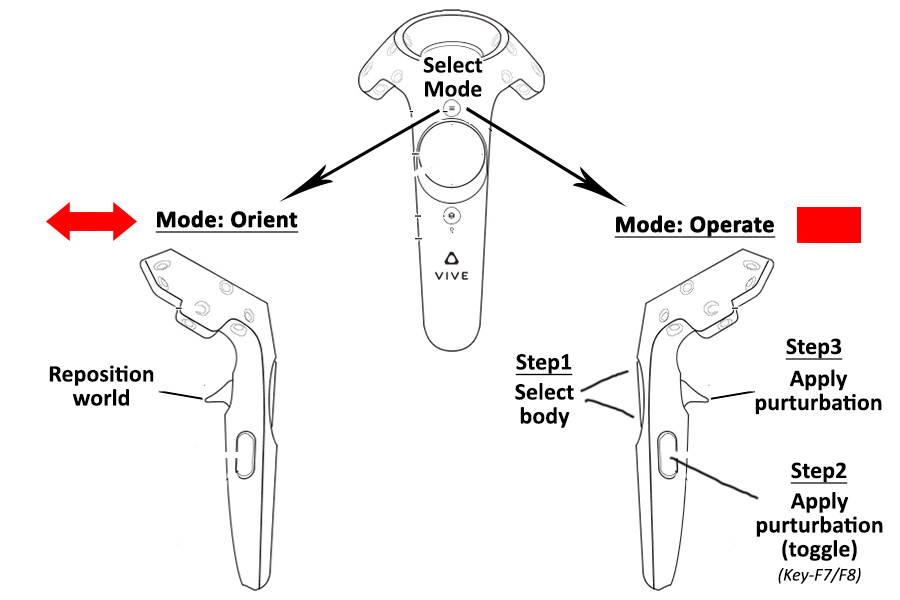
<style>
.page{position:relative;width:900px;height:600px;background:#ffffff}
.page>*{position:absolute;margin:0}
.t1{font:24px/24px "Calibri-Bold";color:#000000}
.t2{font:24px "Calibri-Bold";color:#000000;font-weight:bold;text-decoration:underline}
.t3{font:24px "Calibri-Bold";color:#000000;text-decoration:underline}
.t4{font:18px/24px "Calibri-Italic";color:#000000}
</style>
<div class="page">
<p class="t1" style="left:423px;top:56px;width:60px;height:41px;text-align:center">Select<br>Mode</p>
<p class="t2" style="left:155px;top:210px;width:144px;height:23px">Mode: Orient</p>
<p class="t2" style="left:614px;top:215px;width:162px;height:23px">Mode: Operate</p>
<p class="t3" style="left:785px;top:338px;width:58px;height:22px">Step3</p>
<p class="t1" style="left:49px;top:365px;width:105px;height:41px;text-align:center">Reposition<br>world</p>
<p class="t3" style="left:515px;top:354px;width:58px;height:22px">Step1</p>
<p class="t1" style="left:755px;top:369px;width:127px;height:46px;text-align:center">Apply<br>purturbation</p>
<p class="t1" style="left:515px;top:383px;width:59px;height:45px;text-align:center">Select<br>body</p>
<p class="t3" style="left:790px;top:462px;width:58px;height:22px">Step2</p>
<p class="t1" style="left:756px;top:492px;width:127px;height:92px;text-align:center">Apply<br>purturbation<br>(toggle)<br><span class="t4">(Key-F7/F8)</span></p>
</div>
